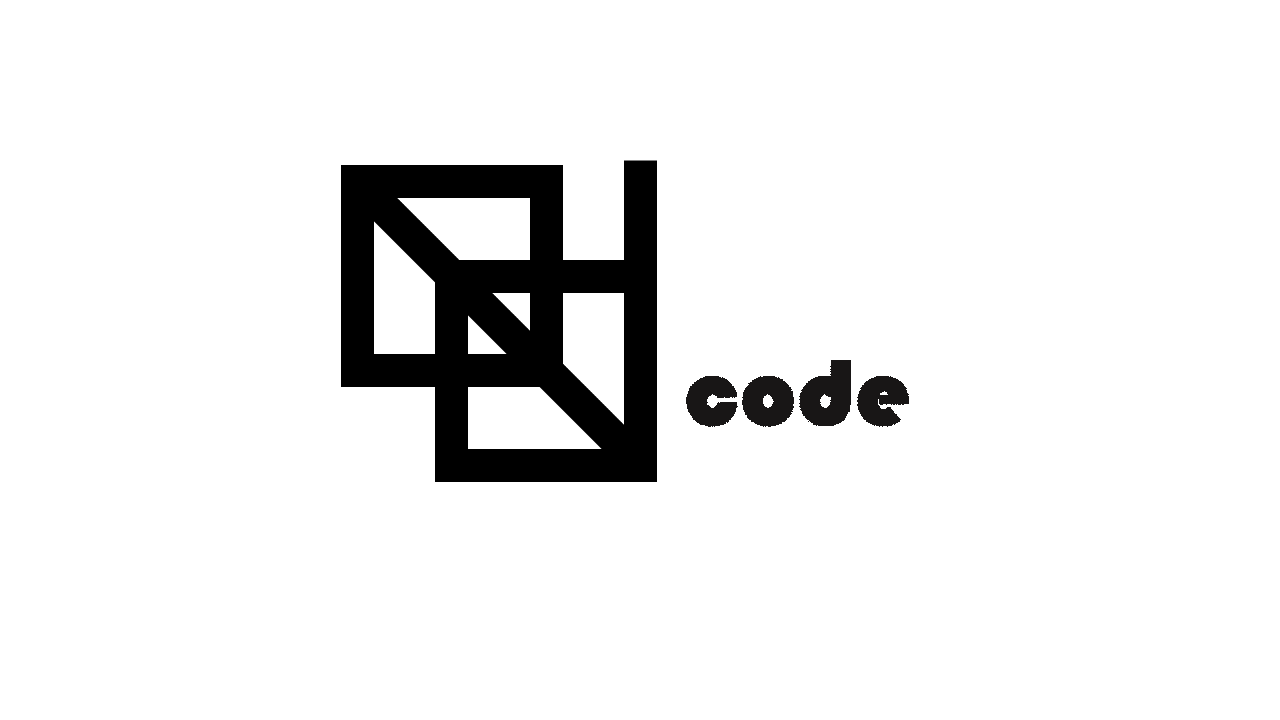
<style>
.page{position:relative;width:1280px;height:720px;background:#ffffff}
.page>*{position:absolute;margin:0}
.t1{font:96px "Bauhaus93";color:#181616;font-weight:bold}
</style>
<div class="page">
<p class="t1" style="left:686px;top:360px;width:223px;height:67px">code</p>
</div>
